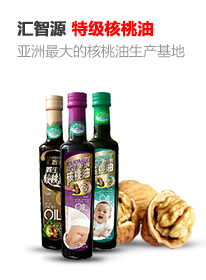
<style>
.page{position:relative;width:206px;height:280px;background:#ffffff}
.page>*{position:absolute;margin:0}
.t1{font:16px "MicrosoftYaHei-Bold";color:#ff0000;font-weight:bold}
.t2{font:16px "MicrosoftYaHei-Bold";color:#3b3b3b;font-weight:bold}
.t3{font:14px "MicrosoftYaHei";color:#969696}
</style>
<div class="page">
<p class="t1" style="left:17px;top:20px;width:136px;height:17px"><span class="t2">汇智源 </span>特级核桃油</p>
<p class="t3" style="left:17px;top:44px;width:168px;height:14px">亚洲最大的核桃油生产基地</p>
</div>
